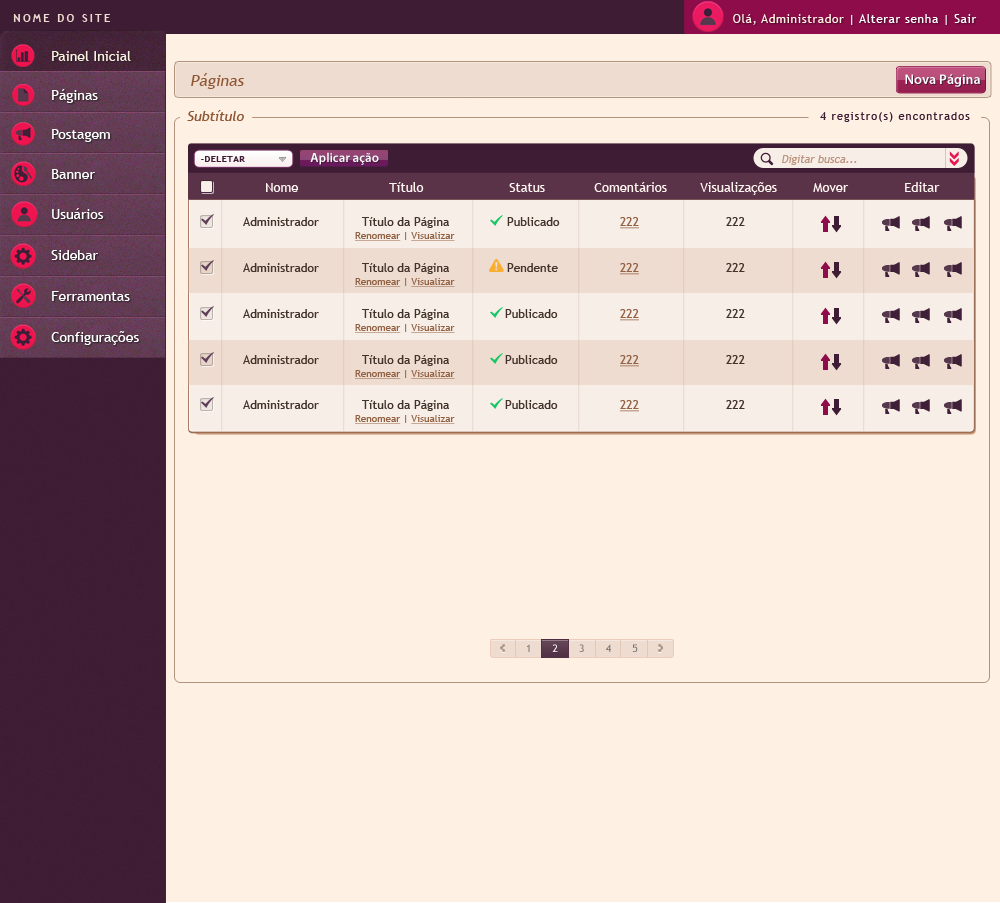
<style>
.page{position:relative;width:1000px;height:903px;background:#fef1e4}
.page>*{position:absolute;margin:0}
.t1{font:11px "TrebuchetMS-Bold";letter-spacing:0.2em;color:#efdcd0;text-transform:uppercase}
.t2{font:12px "TrebuchetMS";letter-spacing:0.05em;color:#ffffff}
.t3{font:12px "TrebuchetMS";letter-spacing:0.05em;color:#fef1e4}
.t4{font:14px "TrebuchetMS";color:#fef1e4}
.t5{font:16px "TrebuchetMS";color:#8f5734;font-style:italic}
.t6{font:14px "MyriadPro-Semibold";color:#fefefe}
.t7{font:14px "TrebuchetMS";color:#ffffff}
.t8{font:14px "TrebuchetMS";color:#8f5734;font-style:italic}
.t9{font:11px "TrebuchetMS";letter-spacing:0.1em;color:#3e1c34}
.t10{font:9px "TrebuchetMS-Bold";letter-spacing:0.05em;color:#3e1c34;text-transform:uppercase}
.t11{font:13px "MyriadPro-Semibold";color:#fefefe}
.t12{font:11px "TrebuchetMS";color:#bb947d;font-style:italic}
.t13{font:13px "TrebuchetMS";color:#fff6f0}
.t14{font:12px "TrebuchetMS";color:#43342b}
.t15{font:12px "TrebuchetMS";color:#926244;text-decoration:underline}
.t16{font:10px "TrebuchetMS";color:#926244;text-decoration:underline}
.t17{font:10px "TrebuchetMS";color:#926244}
.t18{font:10.4px "TrebuchetMS"}
.t19{font:10.4px "TrebuchetMS";color:#ffffff}
.t20{font:10.4px "TrebuchetMS";color:#706f6f}
</style>
<div class="page">
<p class="t1" style="left:13px;top:14px;width:97px;height:8px">Nome do site</p>
<p class="t2" style="left:733px;top:14px;width:244px;height:11px"><span class="t3">Olá, Administrador </span>| Alterar senha | Sair</p>
<p class="t4" style="left:52px;top:51px;width:79px;height:10px">Painel Inicial</p>
<p class="t5" style="left:191px;top:73px;width:53px;height:16px">Páginas</p>
<p class="t6" style="left:905px;top:74px;width:75px;height:13px">Nova Página</p>
<p class="t7" style="left:52px;top:89px;width:46px;height:14px">Páginas</p>
<p class="t8" style="left:187px;top:110px;width:57px;height:11px">Subtítulo</p>
<p class="t9" style="left:820px;top:112px;width:150px;height:10px">4 registro(s) encontrados</p>
<p class="t7" style="left:52px;top:129px;width:58px;height:13px">Postagem</p>
<p class="t10" style="left:201px;top:156px;width:44px;height:6px">-DELETAR</p>
<p class="t11" style="left:310px;top:152px;width:69px;height:13px">Aplicar ação</p>
<p class="t12" style="left:782px;top:155px;width:75px;height:10px">Digitar busca...</p>
<p class="t7" style="left:52px;top:169px;width:43px;height:10px">Banner</p>
<p class="t13" style="left:266px;top:183px;width:32px;height:9px">Nome</p>
<p class="t13" style="left:389px;top:182px;width:35px;height:10px">Título</p>
<p class="t13" style="left:509px;top:183px;width:36px;height:9px">Status</p>
<p class="t13" style="left:594px;top:182px;width:73px;height:10px">Comentários</p>
<p class="t13" style="left:700px;top:182px;width:77px;height:13px">Visualizações</p>
<p class="t13" style="left:813px;top:183px;width:36px;height:9px">Mover</p>
<p class="t13" style="left:905px;top:182px;width:35px;height:10px">Editar</p>
<p class="t7" style="left:52px;top:208px;width:52px;height:11px">Usuários</p>
<p class="t14" style="left:243px;top:217px;width:76px;height:9px">Administrador</p>
<p class="t14" style="left:362px;top:217px;width:87px;height:11px">Título da Página</p>
<p class="t14" style="left:507px;top:217px;width:53px;height:9px">Publicado</p>
<p class="t15" style="left:620px;top:217px;width:19px;height:12px">222</p>
<p class="t14" style="left:726px;top:217px;width:19px;height:9px">222</p>
<p class="t16" style="left:355px;top:232px;width:100px;height:9px">Renomear<span class="t17"> | </span>Visualizar</p>
<p class="t7" style="left:51px;top:250px;width:47px;height:10px">Sidebar</p>
<p class="t14" style="left:243px;top:263px;width:76px;height:9px">Administrador</p>
<p class="t14" style="left:362px;top:263px;width:87px;height:11px">Título da Página</p>
<p class="t14" style="left:507px;top:263px;width:51px;height:9px">Pendente</p>
<p class="t15" style="left:620px;top:263px;width:19px;height:12px">222</p>
<p class="t14" style="left:726px;top:263px;width:19px;height:9px">222</p>
<p class="t16" style="left:355px;top:278px;width:100px;height:9px">Renomear<span class="t17"> | </span>Visualizar</p>
<p class="t7" style="left:52px;top:291px;width:78px;height:10px">Ferramentas</p>
<p class="t14" style="left:243px;top:309px;width:76px;height:9px">Administrador</p>
<p class="t14" style="left:362px;top:309px;width:87px;height:11px">Título da Página</p>
<p class="t14" style="left:505px;top:309px;width:53px;height:9px">Publicado</p>
<p class="t15" style="left:620px;top:309px;width:19px;height:12px">222</p>
<p class="t14" style="left:726px;top:309px;width:19px;height:9px">222</p>
<p class="t16" style="left:355px;top:324px;width:100px;height:9px">Renomear<span class="t17"> | </span>Visualizar</p>
<p class="t7" style="left:51px;top:331px;width:88px;height:14px">Configurações</p>
<p class="t14" style="left:243px;top:355px;width:76px;height:9px">Administrador</p>
<p class="t14" style="left:362px;top:355px;width:87px;height:11px">Título da Página</p>
<p class="t14" style="left:505px;top:355px;width:53px;height:9px">Publicado</p>
<p class="t15" style="left:620px;top:355px;width:19px;height:12px">222</p>
<p class="t14" style="left:726px;top:355px;width:19px;height:9px">222</p>
<p class="t16" style="left:355px;top:370px;width:100px;height:9px">Renomear<span class="t17"> | </span>Visualizar</p>
<p class="t14" style="left:243px;top:400px;width:76px;height:9px">Administrador</p>
<p class="t14" style="left:362px;top:400px;width:87px;height:11px">Título da Página</p>
<p class="t14" style="left:505px;top:400px;width:53px;height:9px">Publicado</p>
<p class="t15" style="left:620px;top:400px;width:19px;height:12px">222</p>
<p class="t14" style="left:726px;top:400px;width:19px;height:9px">222</p>
<p class="t16" style="left:355px;top:415px;width:100px;height:9px">Renomear<span class="t17"> | </span>Visualizar</p>
<p class="t18" style="left:527px;top:644px;width:3px;height:8px">1</p>
<p class="t19" style="left:552px;top:644px;width:6px;height:8px">2</p>
<p class="t18" style="left:579px;top:644px;width:5px;height:8px">3</p>
<p class="t20" style="left:606px;top:644px;width:5px;height:8px">4</p>
<p class="t20" style="left:632px;top:644px;width:6px;height:8px">5</p>
</div>
